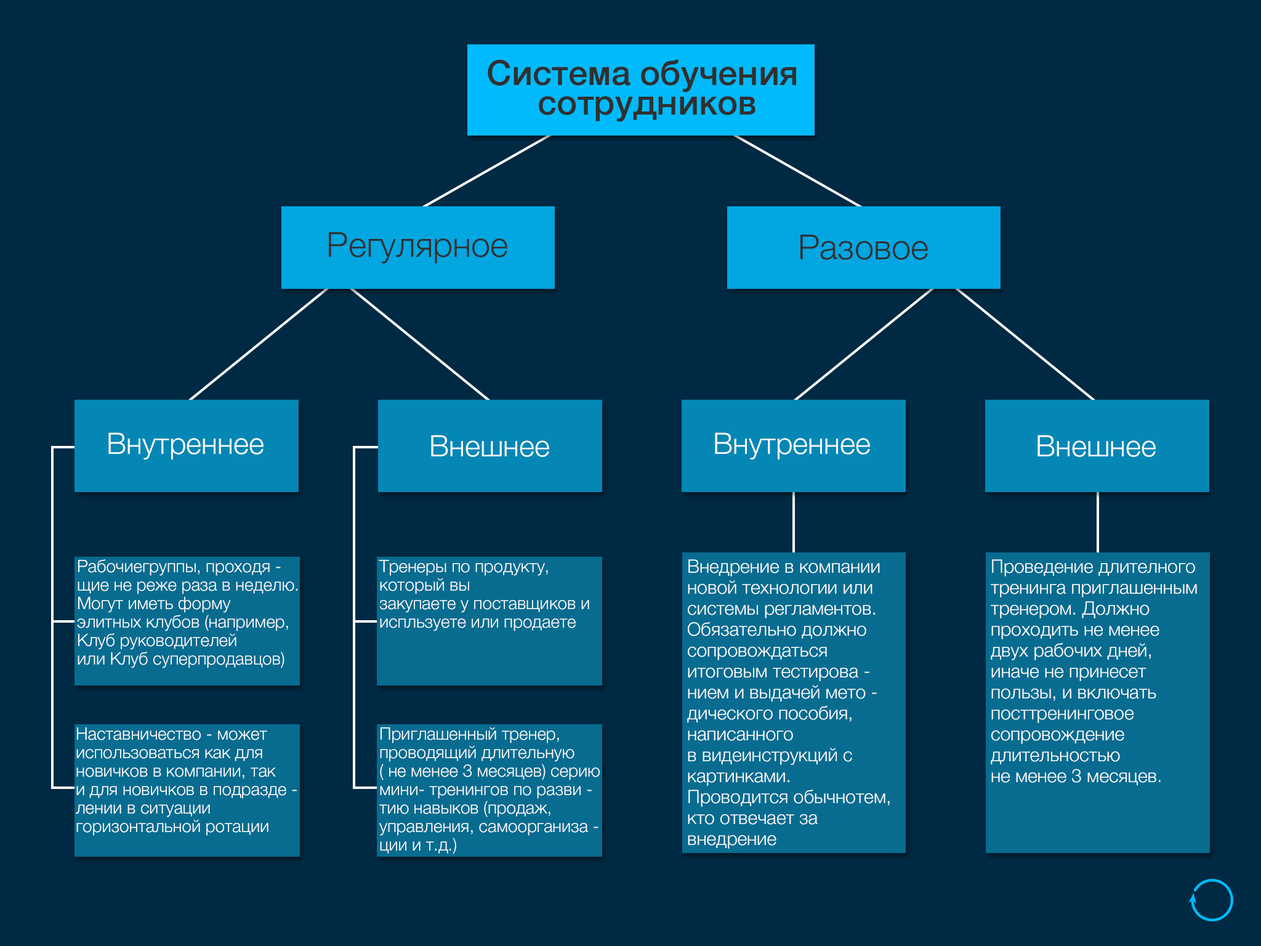
<style>
.page{position:relative;width:1261px;height:946px;background:#002a43}
.page>*{position:absolute;margin:0}
.t1{font:34.5px/29.6px "HelveticaNeue-Medium";color:#303030}
.t2{font:34.5px "HelveticaNeue-Light";color:#303030}
.t3{font:29.6px "HelveticaNeue-Light";color:#ffffff}
.t4{font:17.2px/18.5px "HelveticaNeue-Light";letter-spacing:-0.005em;color:#ffffff}
.t5{font:18.5px/20.9px "HelveticaNeue-Light";color:#ffffff}
</style>
<div class="page">
<p class="t1" style="left:488px;top:60px;width:308px;height:62px;text-align:center">Система обучения <br>сотрудников</p>
<p class="t2" style="left:329px;top:232px;width:178px;height:32px">Регулярное</p>
<p class="t2" style="left:800px;top:235px;width:128px;height:25px">Разовое</p>
<p class="t3" style="left:108px;top:432px;width:156px;height:27px">Внутреннее</p>
<p class="t3" style="left:431px;top:435px;width:118px;height:22px">Внешнее</p>
<p class="t3" style="left:715px;top:432px;width:155px;height:27px">Внутреннее</p>
<p class="t3" style="left:1037px;top:435px;width:119px;height:22px">Внешнее</p>
<p class="t4" style="left:77px;top:559px;width:220px;height:109px">Рабочиегруппы, проходя -<br>щие не реже раза в неделю.<br>Могут иметь форму <br>элитных клубов (например, <br>Клуб руководителей<br>или Клуб суперпродавцов)</p>
<p class="t4" style="left:379px;top:560px;width:210px;height:71px">Тренеры по продукту, <br>который вы<br>закупаете у поставщиков и <br>испльзуете или продаете</p>
<p class="t5" style="left:687px;top:559px;width:203px;height:289px">Внедрение в компании <br>новой технологии или <br>системы регламентов. <br>Обязательно должно <br>сопровождаться <br>итоговым тестирова - <br>нием и выдачей мето -<br>дического пособия,<br>написанного <br>в видеинструкций с <br>картинками.<br>Проводится обычнотем, <br>кто отвечает за <br>внедрение</p>
<p class="t5" style="left:991px;top:559px;width:206px;height:226px">Проведение длителного <br>тренинга приглашенным <br>тренером. Должно <br>проходить не менее <br>двух рабочих дней,<br>иначе не принесет <br>пользы, и включать <br>посттренинговое<br>сопровождение<br>длительностью <br>не менее 3 месяцев.</p>
<p class="t4" style="left:76px;top:727px;width:221px;height:108px">Наставничество - может <br>использоваться как для <br>новичков в компании, так<br>и для новичков в подразде -<br>лении в ситуации <br>горизонтальной ротации</p>
<p class="t4" style="left:379px;top:727px;width:221px;height:127px">Приглашенный тренер, <br>проводящий длительную <br>( не менее 3 месяцев) серию <br>мини- тренингов по разви -<br>тию навыков (продаж, <br>управления, самоорганиза -<br>ции и т.д.)</p>
</div>
